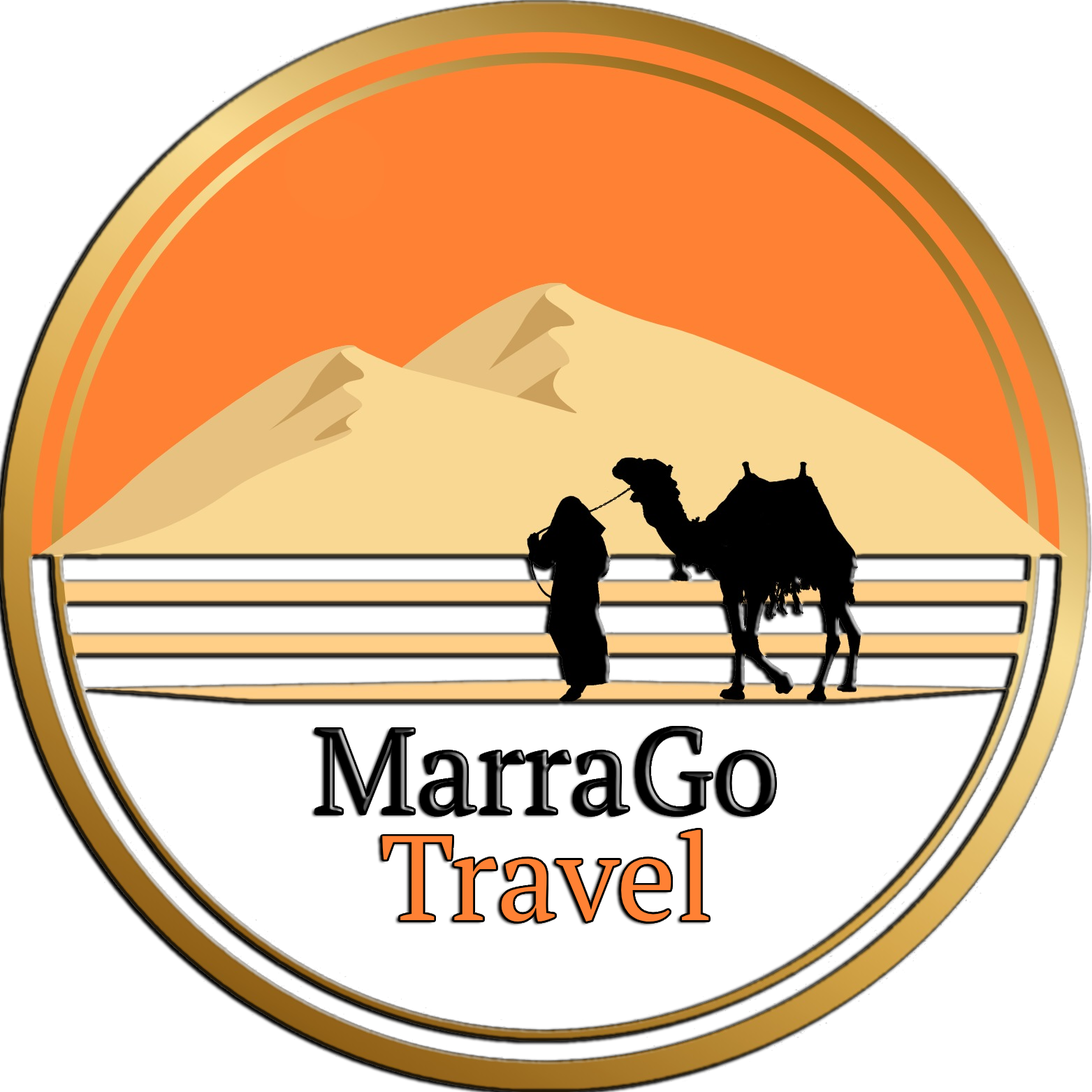
<style>
.page{position:relative;width:1092px;height:1092px;background:#ffffff}
.page>*{position:absolute;margin:0}
.t1{font:120.2px "PTSerif-Regular";color:#000000}
.t2{font:120.2px "PTSerif-Regular";color:#ff8134}
</style>
<div class="page">
<p class="t1" style="left:316px;top:727px;width:459px;height:88px">MarraGo</p>
<p class="t2" style="left:382px;top:829px;width:327px;height:93px">Travel</p>
</div>
